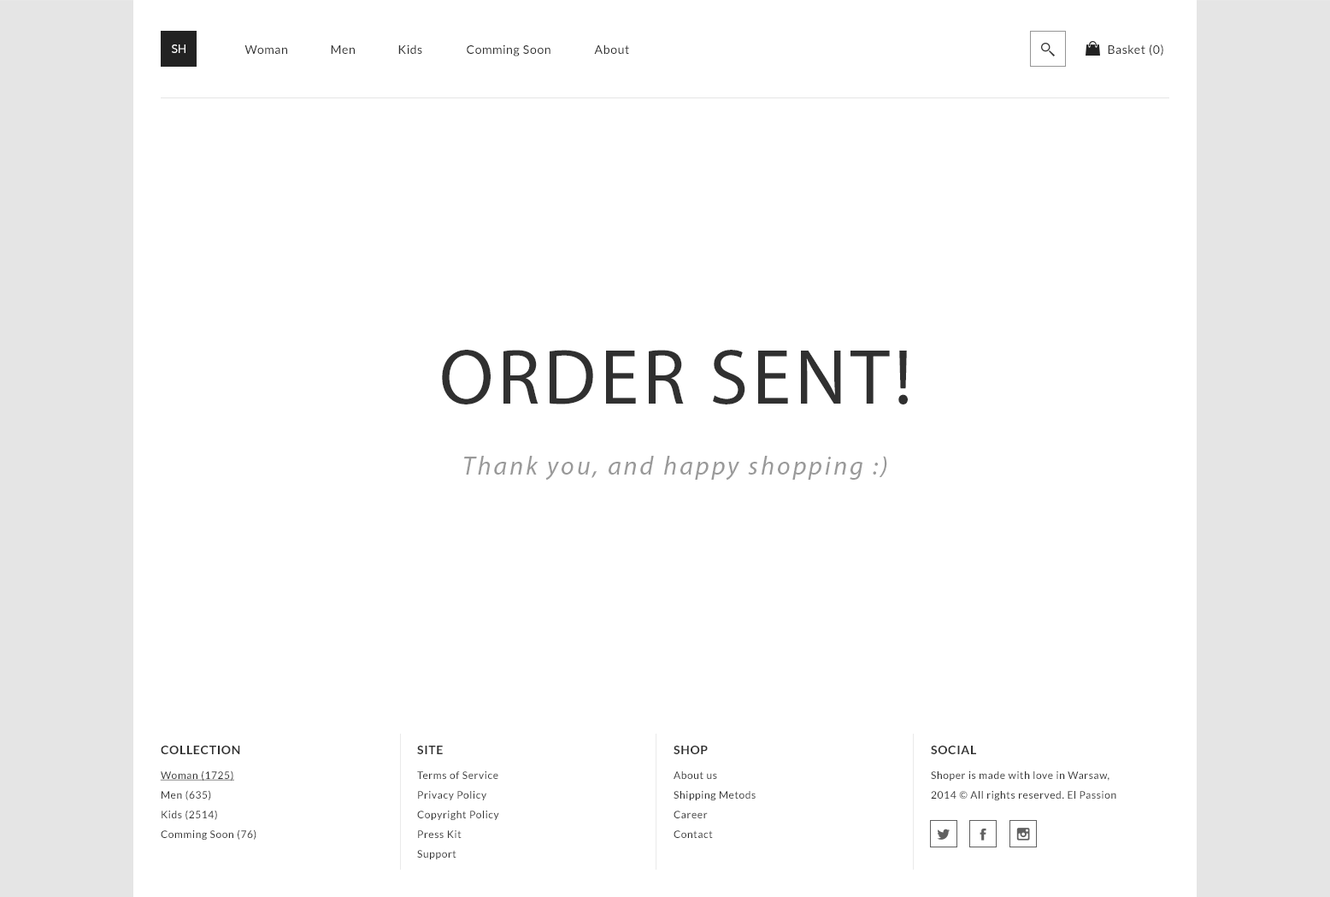
<style>
.page{position:relative;width:1330px;height:897px;background:#ffffff}
.page>*{position:absolute;margin:0}
.t1{font:12px "Lato-Regular";color:#ffffff;text-transform:uppercase}
.t2{font:12px "Lato-Regular";letter-spacing:0.05em;color:#303030}
.t3{font:78.6px "MyriadPro-Regular";letter-spacing:0.05em;color:#303030;text-transform:uppercase}
.t4{font:25.6px "MyriadPro-It";letter-spacing:0.1em;color:#999999}
.t5{font:12px "Lato-Bold";letter-spacing:0.05em;color:#303030;text-transform:uppercase}
.t6{font:10.3px/19.7px "Lato-Regular";letter-spacing:0.05em;color:#303030}
.t7{font:10.3px/19.7px "Lato-Regular";letter-spacing:0.05em;color:#303030;text-decoration:underline}
</style>
<div class="page">
<p class="t1" style="left:172px;top:44px;width:13px;height:9px">sh</p>
<p class="t2" style="left:244px;top:45px;width:43px;height:9px">Woman</p>
<p class="t2" style="left:331px;top:45px;width:24px;height:9px">Men</p>
<p class="t2" style="left:398px;top:44px;width:24px;height:10px">Kids</p>
<p class="t2" style="left:467px;top:44px;width:83px;height:12px">Comming Soon</p>
<p class="t2" style="left:594px;top:44px;width:35px;height:10px">About</p>
<p class="t2" style="left:1108px;top:44px;width:55px;height:12px">Basket (0)</p>
<p class="t3" style="left:442px;top:350px;width:466px;height:54px">ORDER SENT!</p>
<p class="t4" style="left:464px;top:456px;width:423px;height:24px">Thank you, and happy shopping :)</p>
<p class="t5" style="left:161px;top:745px;width:79px;height:9px">Collection</p>
<p class="t5" style="left:417px;top:745px;width:26px;height:9px">site</p>
<p class="t5" style="left:674px;top:745px;width:34px;height:9px">Shop</p>
<p class="t5" style="left:931px;top:745px;width:45px;height:9px">social</p>
<p class="t6" style="left:160px;top:770px;width:96px;height:69px"><span class="t7">Woman (1725)<br></span>Men (635)<br>Kids (2514)<br>Comming Soon (76)</p>
<p class="t6" style="left:417px;top:771px;width:82px;height:88px">Terms of Service <br>Privacy Policy <br>Copyright Policy <br>Press Kit <br>Support</p>
<p class="t6" style="left:674px;top:771px;width:82px;height:67px">About us<br>Shipping Metods<br>Career<br>Contact</p>
<p class="t6" style="left:931px;top:771px;width:185px;height:29px">Shoper is made with love in Warsaw, <br>2014 © All rights reserved. El Passion</p>
</div>
